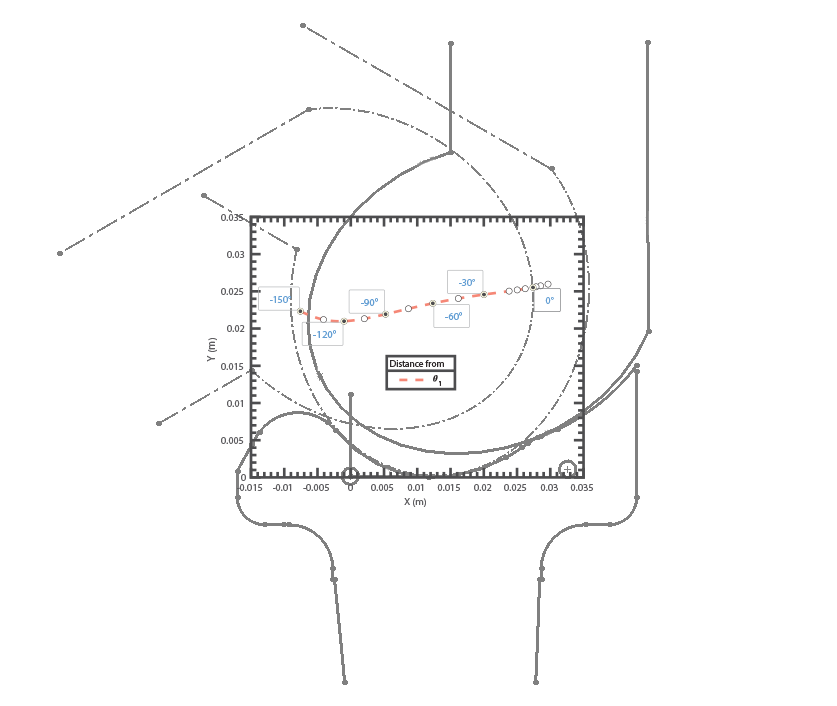
<style>
.page{position:relative;width:837px;height:706px;background:#ffffff}
.page>*{position:absolute;margin:0}
.t1{font:10.2px "MyriadPro-Regular";color:#4d4d4f}
.t2{font:10.2px "MyriadPro-Regular";color:#649fd4}
.t3{font:10.7px "MyriadPro-Regular";color:#649fd4}
.t4{font:10.7px "MyriadPro-Regular";color:#4d4d4f}
.t5{font:9.3px "MyriadPro-Regular";color:#231f20}
.t6{font:7.4px "MyriadPro-Regular";color:#2f2a2b}
.t7{font:10.2px "MyriadPro-Regular";letter-spacing:0.939em;color:#4d4d4f}
.t8{font:10.2px "MyriadPro-Regular";letter-spacing:1.767em;color:#4d4d4f}
</style>
<div class="page">
<p class="t1" style="left:221px;top:214px;width:23px;height:7px">0.035</p>
<p class="t1" style="left:227px;top:251px;width:18px;height:7px">0.03</p>
<p class="t2" style="left:459px;top:279px;width:16px;height:7px">-30°</p>
<p class="t1" style="left:221px;top:288px;width:23px;height:7px">0.025</p>
<p class="t2" style="left:270px;top:296px;width:21px;height:7px">-150°</p>
<p class="t3" style="left:361px;top:298px;width:17px;height:8px">-90°</p>
<p class="t2" style="left:545px;top:297px;width:9px;height:7px">0°</p>
<p class="t3" style="left:445px;top:312px;width:17px;height:8px">-60°</p>
<p class="t1" style="left:227px;top:325px;width:18px;height:7px">0.02</p>
<p class="t4" style="left:207px;top:341px;width:10px;height:21px">Y (m</p>
<p class="t1" style="left:208px;top:338px;width:9px;height:3px">)</p>
<p class="t3" style="left:313px;top:330px;width:23px;height:8px">-120°</p>
<p class="t1" style="left:221px;top:363px;width:23px;height:7px">0.015</p>
<p class="t5" style="left:390px;top:360px;width:54px;height:7px">Distance from</p>
<p class="t6" style="left:439px;top:381px;width:2px;height:5px">1</p>
<p class="t1" style="left:227px;top:400px;width:16px;height:7px">0.01</p>
<p class="t1" style="left:221px;top:437px;width:23px;height:7px">0.005</p>
<p class="t1" style="left:237px;top:484px;width:26px;height:7px">-0.015</p>
<p class="t1" style="left:241px;top:474px;width:5px;height:7px">0</p>
<p class="t1" style="left:273px;top:484px;width:15px;height:7px">-0.0</p>
<p class="t7" style="left:288px;top:484px;width:18px;height:7px">1-</p>
<p class="t1" style="left:306px;top:484px;width:23px;height:7px">0.005</p>
<p class="t8" style="left:348px;top:484px;width:28px;height:7px">00</p>
<p class="t1" style="left:376px;top:484px;width:18px;height:7px">.005</p>
<p class="t1" style="left:407px;top:484px;width:17px;height:7px">0.01</p>
<p class="t1" style="left:437px;top:484px;width:23px;height:7px">0.015</p>
<p class="t1" style="left:474px;top:484px;width:18px;height:7px">0.02</p>
<p class="t1" style="left:504px;top:484px;width:23px;height:7px">0.025</p>
<p class="t1" style="left:540px;top:484px;width:18px;height:7px">0.03</p>
<p class="t1" style="left:570px;top:484px;width:23px;height:7px">0.035</p>
<p class="t1" style="left:404px;top:498px;width:20px;height:9px">X (m</p>
<p class="t1" style="left:423px;top:498px;width:3px;height:9px">)</p>
</div>
